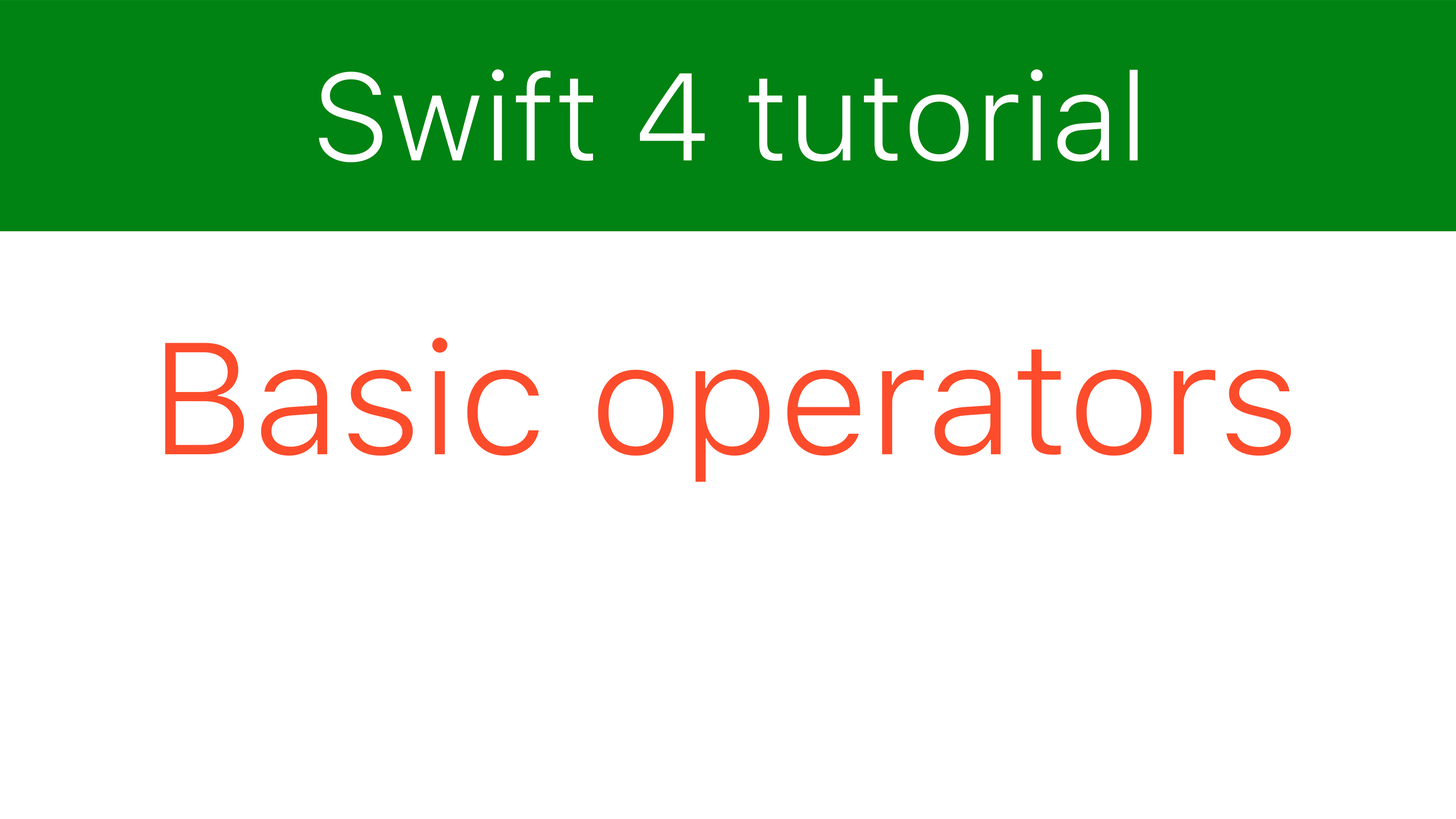
<style>
.page{position:relative;width:1456px;height:819px;background:#ffffff}
.page>*{position:absolute;margin:0}
.t1{font:123.2px "SFUIText-Light";color:#ffffff}
.t2{font:158px "SFUIText-Light";color:#fd4c2b}
</style>
<div class="page">
<p class="t1" style="left:319px;top:69px;width:819px;height:93px">Swift 4 tutorial</p>
<p class="t2" style="left:165px;top:337px;width:1126px;height:145px">Basic operators</p>
</div>
